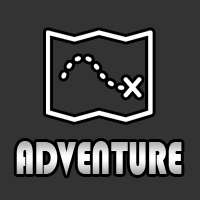
<style>
.page{position:relative;width:200px;height:200px;background:#333333}
.page>*{position:absolute;margin:0}
.t1{font:48px "Bauhaus93";scale:0.69 1}
</style>
<div class="page">
<p class="t1" style="left:16px;top:141px;width:166px;height:35px">ADVENTURE</p>
</div>
